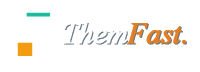
<style>
.page{position:relative;width:200px;height:72px;background:#ffffff}
.page>*{position:absolute;margin:0}
.t1{font:37px "Vijaya";letter-spacing:-0.025em;color:#e67e22;font-weight:bold}
.t2{font:37px "Vijaya";letter-spacing:-0.025em;color:#ffffff;font-weight:bold}
</style>
<div class="page">
<p class="t1" style="left:63px;top:22px;width:123px;height:22px"><span class="t2">Them</span>Fast.</p>
</div>
